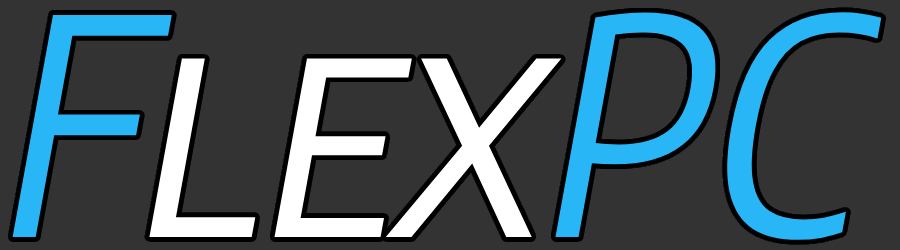
<style>
.page{position:relative;width:900px;height:250px;background:#333333}
.page>*{position:absolute;margin:0}
.t1{font:300px "EncodeSansCondensed-Regular";color:#ffffff;font-variant:small-caps;font-style:italic}
.t2{font:300px "EncodeSansCondensed-Regular";color:#29b6f6;font-variant:small-caps;font-style:italic}
</style>
<div class="page">
<p class="t1" style="left:12px;top:12px;width:870px;height:228px"><span class="t2">F</span>lex<span class="t2">PC</span></p>
</div>
